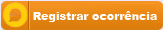
<style>
.page{position:relative;width:163px;height:30px}
.page>*{position:absolute;margin:0}
.t1{font:11px "Arial-Black";color:#ffffff}
</style>
<div class="page">
<p class="t1" style="left:33px;top:11px;width:124px;height:11px">Registrar ocorrência</p>
</div>
